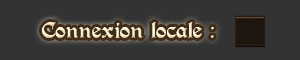
<style>
.page{position:relative;width:300px;height:60px;background:#333333}
.page>*{position:absolute;margin:0}
.t1{font:16px "PerryGothic";color:#fcf4d0}
</style>
<div class="page">
<p class="t1" style="left:42px;top:22px;width:172px;height:17px">Connexion locale :</p>
</div>
